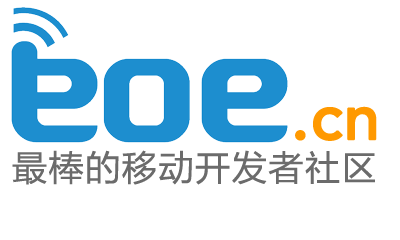
<style>
.page{position:relative;width:400px;height:240px;background:#ffffff}
.page>*{position:absolute;margin:0}
.t1{font:64.5px "Avenir-Medium";color:#ff9900;font-weight:bold}
.t2{font:35.9px "FZLTHK--GBK1-0";letter-spacing:0.02em;color:#6b6b6b}
</style>
<div class="page">
<p class="t1" style="left:295px;top:106px;width:82px;height:35px">.cn</p>
<p class="t2" style="left:12px;top:150px;width:363px;height:35px">最棒的移动开发者社区</p>
</div>
